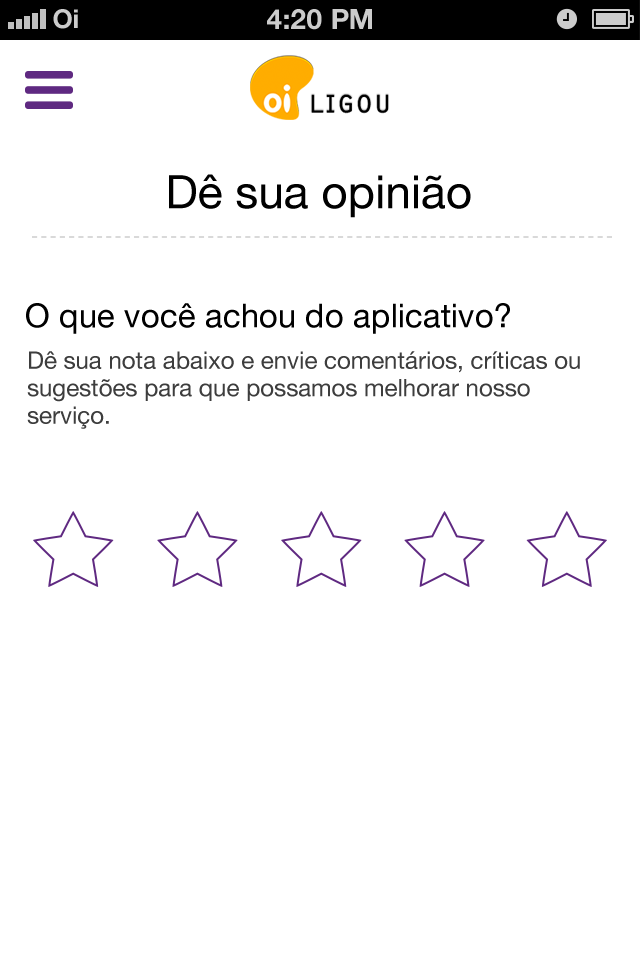
<style>
.page{position:relative;width:640px;height:960px;background:#ffffff}
.page>*{position:absolute;margin:0}
.t1{font:26px "HelveticaNeue-Bold";color:#cccccc}
.t2{font:28px "HelveticaNeue-Bold";color:#cccccc;text-transform:uppercase}
.t3{font:46px "HelveticaNeue-Roman";color:#000000}
.t4{font:33px "HelveticaNeue";color:#000000}
.t5{font:24px/27.5px "HelveticaNeue-Roman";color:#3d3d3d}
</style>
<div class="page">
<p class="t1" style="left:53px;top:9px;width:25px;height:20px">Oi</p>
<p class="t2" style="left:267px;top:9px;width:105px;height:21px">4:20 pM</p>
<p class="t3" style="left:169px;top:174px;width:302px;height:44px">Dê sua opinião</p>
<p class="t4" style="left:26px;top:303px;width:484px;height:31px">O que você achou do aplicativo?</p>
<p class="t5" style="left:27px;top:351px;width:553px;height:78px">Dê sua nota abaixo e envie comentários, críticas ou sugestões para que possamos melhorar nosso serviço.</p>
</div>
